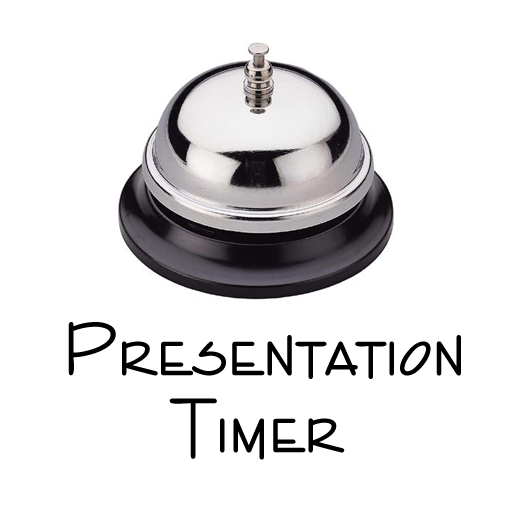
<style>
.page{position:relative;width:512px;height:512px;background:#ffffff}
.page>*{position:absolute;margin:0}
.t1{font:80px "EMILEE-Normal";color:#000000}
</style>
<div class="page">
<p class="t1" style="left:68px;top:322px;width:393px;height:57px">Presentation</p>
<p class="t1" style="left:169px;top:398px;width:176px;height:62px">Timer</p>
</div>
